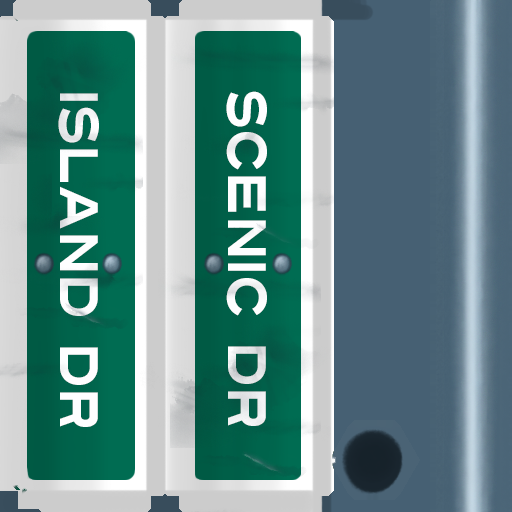
<style>
.page{position:relative;width:512px;height:512px}
.page>*{position:absolute;margin:0}
.t1{font:54px "Turnpike";color:#fefeff;scale:0.75 1}
</style>
<div class="page">
<p class="t1" style="left:58px;top:93px;width:41px;height:334px;rotate:90deg">island Dr</p>
<p class="t1" style="left:226px;top:91px;width:41px;height:335px;rotate:90deg">Scenic Dr</p>
</div>
